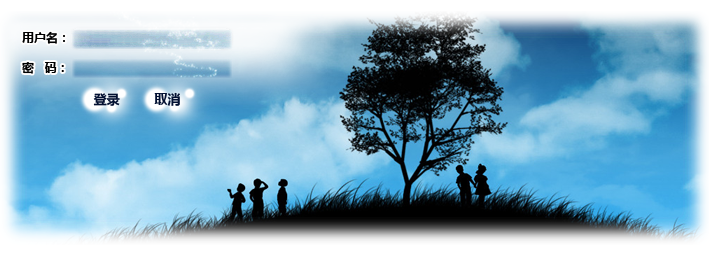
<style>
.page{position:relative;width:709px;height:257px}
.page>*{position:absolute;margin:0}
.t1{font:12px/30px "MicrosoftYaHei";color:#000000}
.t2{font:13px "MicrosoftYaHei";color:#021031}
</style>
<div class="page">
<p class="t1" style="left:22px;top:31px;width:43px;height:43px">用户名：<br>密   码：</p>
<p class="t2" style="left:93px;top:92px;width:87px;height:14px">登录         取消</p>
</div>
